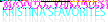
<style>
.page{position:relative;width:108px;height:22px;background:#ffffff}
.page>*{position:absolute;margin:0}
.t1{font:12.6px "MyriadPro-Regular";color:#30ffff;scale:0.92 1}
</style>
<div class="page">
<p class="t1" style="left:2px;top:7px;width:103px;height:9px">KRISTINA’SFAVORITES</p>
</div>
